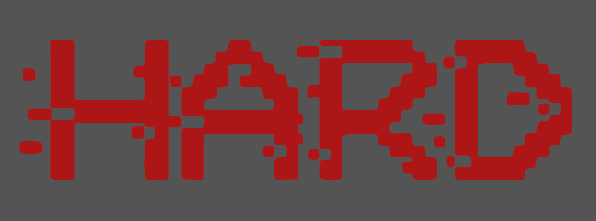
<style>
.page{position:relative;width:596px;height:221px;background:#545454}
.page>*{position:absolute;margin:0}
.t1{font:200px "PositiveSystem";color:#ac1616}
</style>
<div class="page">
<p class="t1" style="left:19px;top:40px;width:554px;height:140px">Hard</p>
</div>
